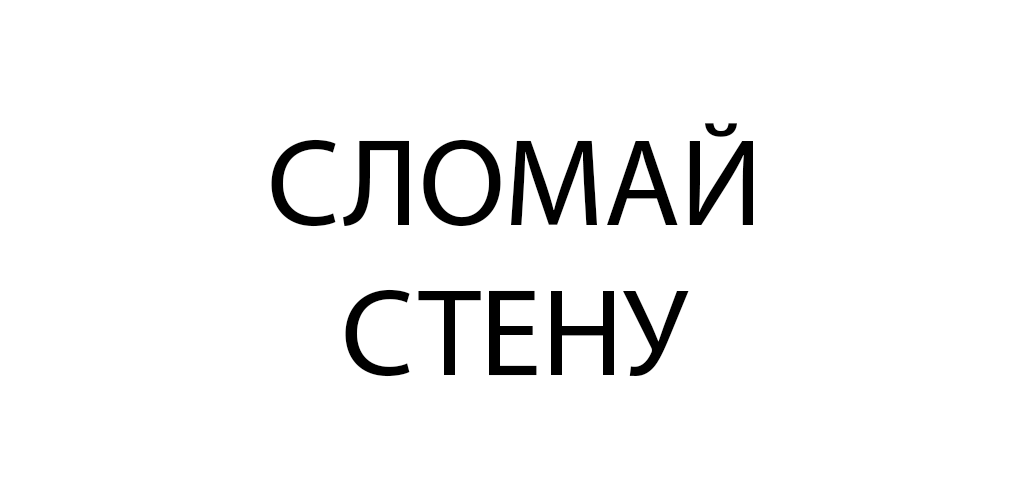
<style>
.page{position:relative;width:1024px;height:500px;background:#ffffff}
.page>*{position:absolute;margin:0}
.t1{font:125px "MyriadPro-Regular";color:#000000}
</style>
<div class="page">
<p class="t1" style="left:271px;top:123px;width:482px;height:254px;text-align:center">СЛОМАЙ<br>СТЕНУ</p>
</div>
